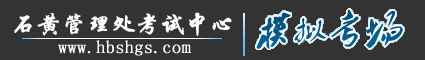
<style>
.page{position:relative;width:425px;height:60px;background:#333333}
.page>*{position:absolute;margin:0}
.t1{font:24px "STXingkai";color:#ffffff;font-weight:bold}
.t2{font:18px "SimSun";color:#ffffff;font-weight:bold}
</style>
<div class="page">
<p class="t1" style="left:14px;top:12px;width:218px;height:24px">石黄管理处考试中心</p>
<p class="t2" style="left:58px;top:40px;width:133px;height:16px">www.hbshgs.com</p>
</div>
